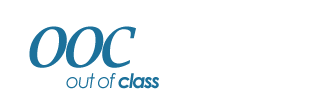
<style>
.page{position:relative;width:327px;height:108px;background:#ffffff}
.page>*{position:absolute;margin:0}
.t1{font:75px "LucidaBright-Italic";letter-spacing:-0.075em;color:#1c719c}
.t2{font:20px "CenturyGothic-Italic";letter-spacing:-0.075em;color:#1c719c}
.t3{font:20px "CenturyGothic-BoldItalic";letter-spacing:-0.075em;color:#1c719c}
</style>
<div class="page">
<p class="t1" style="left:29px;top:26px;width:107px;height:42px">ooc</p>
<p class="t2" style="left:66px;top:73px;width:93px;height:16px">out of <span class="t3">class</span></p>
</div>
